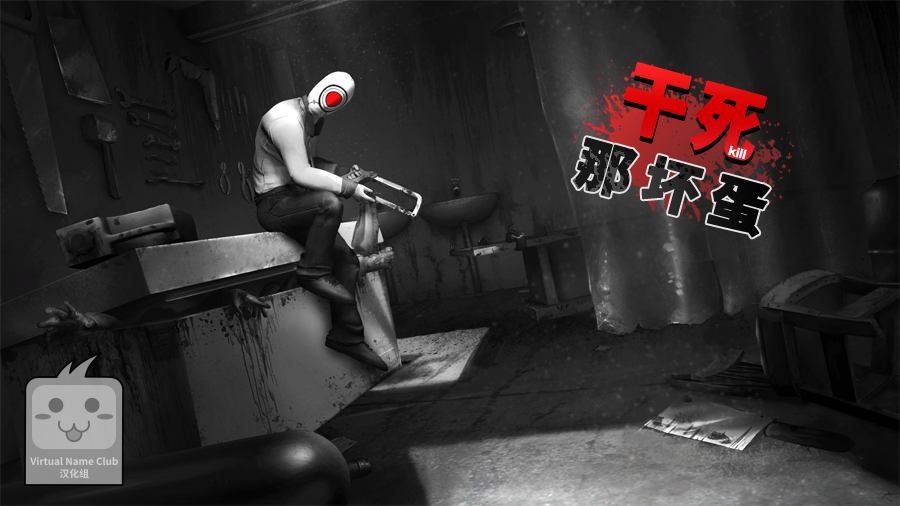
<style>
.page{position:relative;width:900px;height:506px}
.page>*{position:absolute;margin:0}
.t1{font:76.8px "SourceHanSansSC-Heavy";letter-spacing:0.1em;color:#dc0809;font-weight:bold;scale:0.88 1}
.t2{font:56.2px "SourceHanSansSC-Heavy";letter-spacing:0.2em;color:#171717;font-weight:bold}
.t3{font:13.1px "Arial-BoldMT";letter-spacing:-0.05em;color:#ffffff;scale:1.14 1}
</style>
<div class="page">
<p class="t1" style="left:623px;top:62px;width:144px;height:99px;rotate:15deg">干死</p>
<p class="t2" style="left:572px;top:137px;width:198px;height:101px;rotate:15deg">那坏蛋</p>
<p class="t3" style="left:728px;top:145px;width:19px;height:15px;rotate:15deg">kill</p>
</div>
